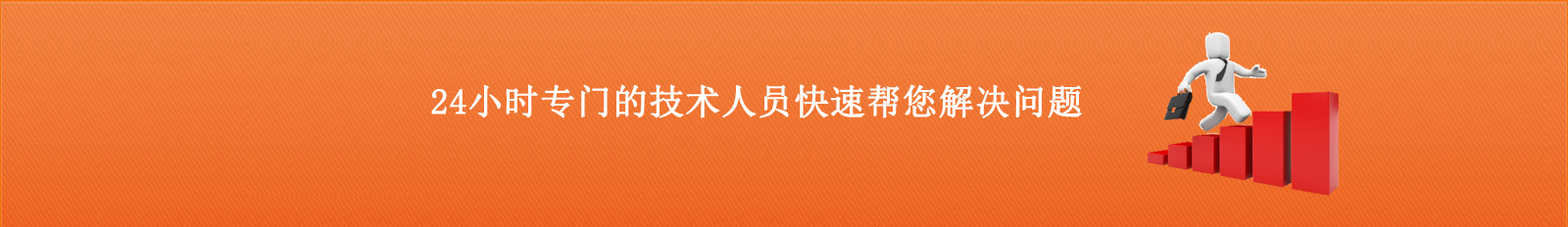
<style>
.page{position:relative;width:1568px;height:227px}
.page>*{position:absolute;margin:0}
.t1{font:35.3px "SimSun";color:#ffffff;font-weight:bold}
</style>
<div class="page">
<p class="t1" style="left:431px;top:84px;width:651px;height:35px">24小时专门的技术人员快速帮您解决问题</p>
</div>
